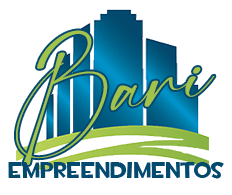
<style>
.page{position:relative;width:232px;height:195px;background:#ffffff}
.page>*{position:absolute;margin:0}
.t1{font:91.4px "DestinySignature";color:#a1c34c}
.t2{font:22.9px "TF2Build";color:#034a6e}
</style>
<div class="page">
<p class="t1" style="left:16px;top:30px;width:199px;height:136px;rotate:-10deg">Bari</p>
<p class="t2" style="left:8px;top:162px;width:216px;height:17px">Empreendimentos</p>
</div>
